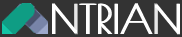
<style>
.page{position:relative;width:182px;height:37px;background:#333333}
.page>*{position:absolute;margin:0}
.t1{font:40px "PoiretOne-Regular";color:#ffffff}
</style>
<div class="page">
<p class="t1" style="left:52px;top:3px;width:126px;height:32px">NTRIAN</p>
<p class="t1" style="left:53px;top:3px;width:126px;height:32px">NTRIAN</p>
<p class="t1" style="left:54px;top:3px;width:126px;height:32px">NTRIAN</p>
</div>
